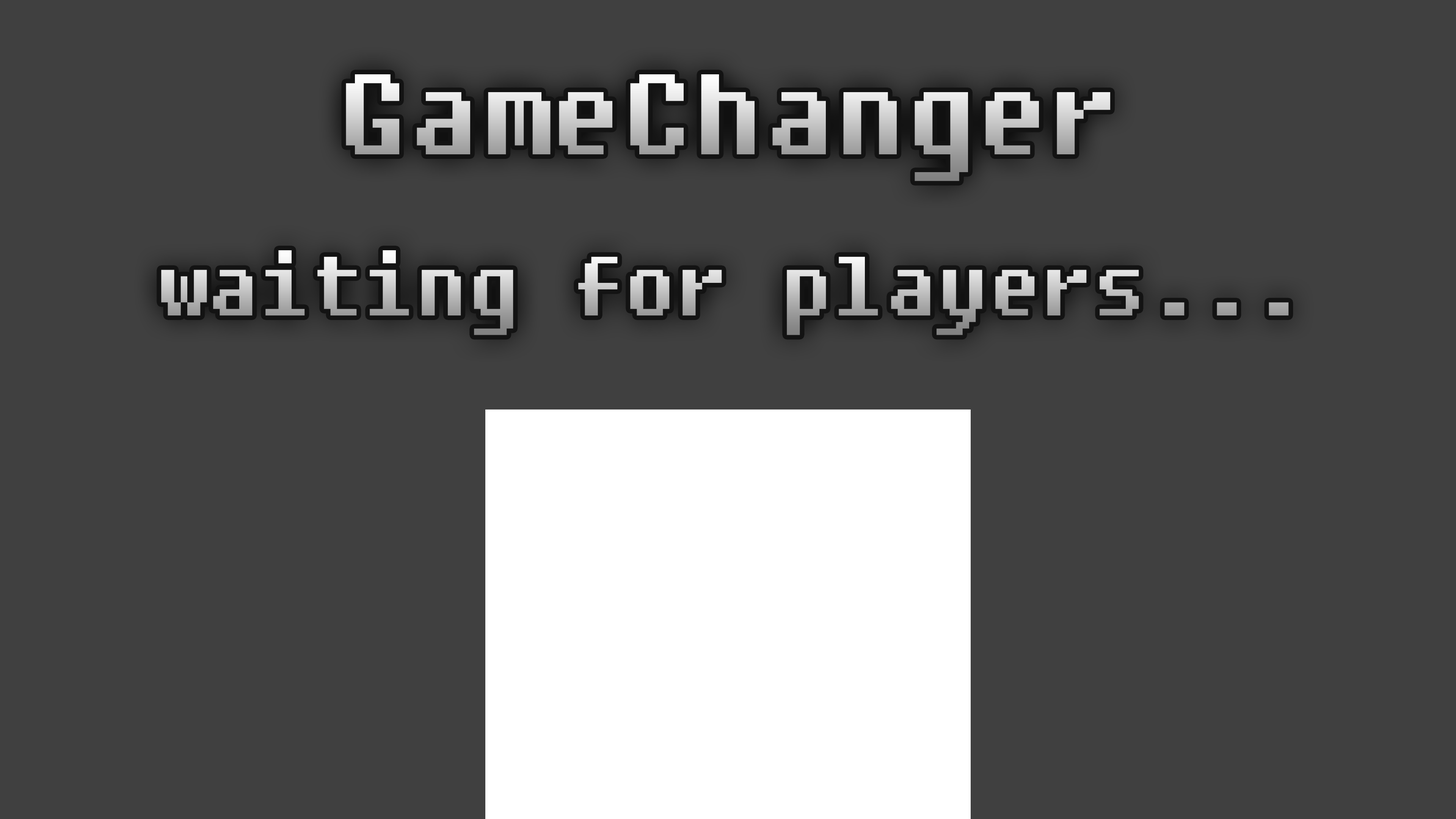
<style>
.page{position:relative;width:1456px;height:819px;background:#404040}
.page>*{position:absolute;margin:0}
.t1{font:113.7px "Fixedsys"}
.t2{font:83.4px "Fixedsys"}
</style>
<div class="page">
<p class="t1" style="left:346px;top:74px;width:764px;height:107px">GameChanger</p>
<p class="t2" style="left:161px;top:250px;width:1128px;height:85px">waiting for players...</p>
</div>
